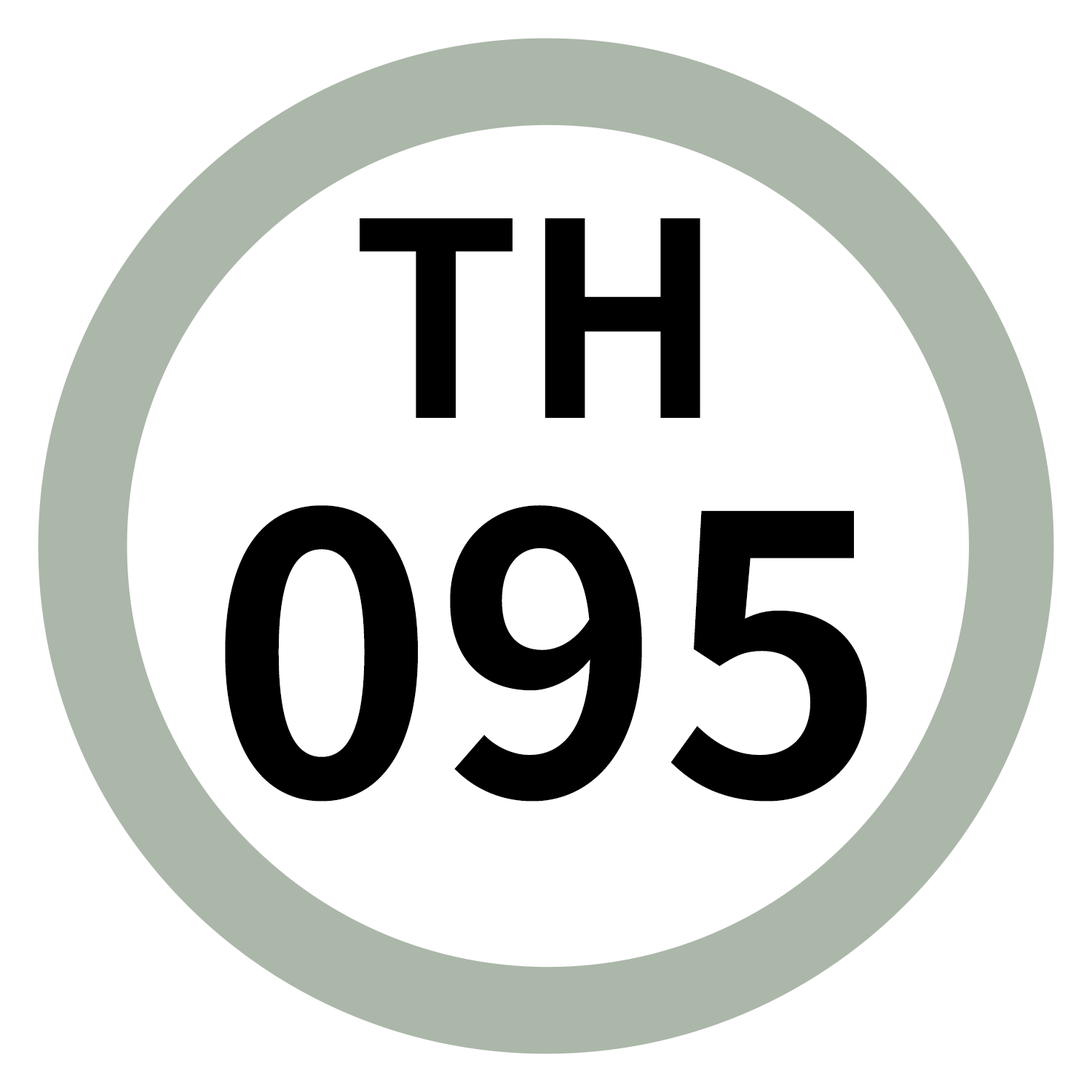
<style>
.page{position:relative;width:1092px;height:1092px;background:#ffffff}
.page>*{position:absolute;margin:0}
.t1{font:269.8px "NotoSansJP-Bold";color:#000000}
.t2{font:384.8px "NotoSansJP-Bold";color:#000000}
</style>
<div class="page">
<p class="t1" style="left:360px;top:218px;width:340px;height:200px">TH</p>
<p class="t2" style="left:225px;top:505px;width:642px;height:297px">095</p>
</div>
